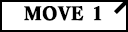
<style>
.page{position:relative;width:128px;height:32px;background:#ffffff}
.page>*{position:absolute;margin:0}
.t1{font:18px "EVA_Matisse_Classic-EB";color:#000000;font-weight:bold}
</style>
<div class="page">
<p class="t1" style="left:24px;top:6px;width:78px;height:15px">MOVE 1</p>
</div>
